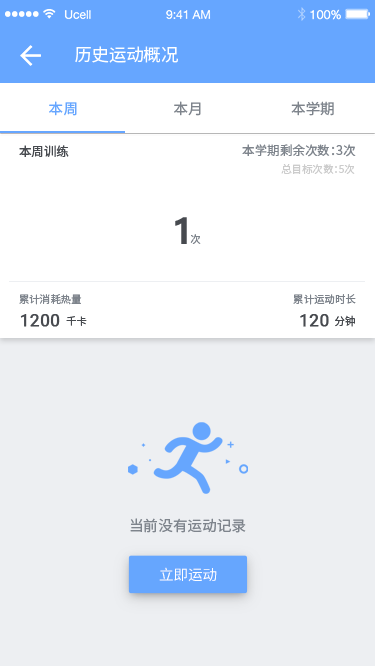
<style>
.page{position:relative;width:375px;height:667px;background:#edeff2}
.page>*{position:absolute;margin:0}
.t1{font:17.4px "NotoSansHans-Regular";color:#ffffff}
.t2{font:14.6px "NotoSansHans-Regular";color:#66a6ff}
.t3{font:14.5px "NotoSansHans-Regular";color:#7e848c}
.t4{font:12.5px "NotoSansHans-Regular";color:#474a4f}
.t5{font:12.5px "NotoSansHans-Regular";color:#7e848c}
.t6{font:10.4px "NotoSansHans-Regular";color:#cccccc}
.t7{font:34.9px "MicrosoftYaHeiUI-Bold";color:#474a4f}
.t8{font:10.5px "NotoSansHans-Regular";color:#7e848c}
.t9{font:10.4px "NotoSansHans-Regular";color:#7e848c}
.t10{font:17.3px "Roboto-Regular";color:#474a4f;font-weight:bold}
.t11{font:10.4px "NotoSansHans-Regular";color:#474a4f}
.t12{font:17.4px "Roboto-Regular";color:#474a4f;font-weight:bold}
.t13{font:10.5px "NotoSansHans-Regular";color:#474a4f}
.t14{font:14.6px "NotoSansHans-Regular";color:#7e848c}
.t15{font:14.6px "NotoSansHans-Regular";letter-spacing:0.01em;color:#ffffff;text-transform:uppercase}
</style>
<div class="page">
<p class="t1" style="left:75px;top:46px;width:103px;height:17px">历史运动概况</p>
<p class="t2" style="left:49px;top:101px;width:28px;height:15px">本周</p>
<p class="t3" style="left:174px;top:101px;width:27px;height:15px">本月</p>
<p class="t3" style="left:291px;top:101px;width:43px;height:15px">本学期</p>
<p class="t4" style="left:19px;top:145px;width:50px;height:12px">本周训练</p>
<p class="t5" style="left:242px;top:144px;width:114px;height:13px">本学期剩余次数：3次</p>
<p class="t6" style="left:281px;top:164px;width:74px;height:10px">总目标次数：5次</p>
<p class="t7" style="left:175px;top:217px;width:12px;height:27px">1</p>
<p class="t8" style="left:190px;top:234px;width:11px;height:10px">次</p>
<p class="t9" style="left:19px;top:294px;width:63px;height:11px">累计消耗热量</p>
<p class="t8" style="left:293px;top:294px;width:63px;height:11px">累计运动时长</p>
<p class="t10" style="left:20px;top:314px;width:40px;height:13px">1200</p>
<p class="t11" style="left:66px;top:316px;width:21px;height:10px">千卡</p>
<p class="t12" style="left:300px;top:314px;width:29px;height:13px">120</p>
<p class="t13" style="left:335px;top:315px;width:20px;height:12px">分钟</p>
<p class="t14" style="left:130px;top:518px;width:116px;height:15px">当前没有运动记录</p>
<p class="t15" style="left:159px;top:567px;width:58px;height:15px">立即运动</p>
</div>
